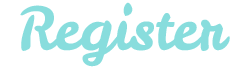
<style>
.page{position:relative;width:250px;height:69px;background:#ffffff}
.page>*{position:absolute;margin:0}
.t1{font:59px "LeckerliOne-Regular";color:#88dddd}
</style>
<div class="page">
<p class="t1" style="left:20px;top:2px;width:210px;height:65px">Register</p>
</div>
